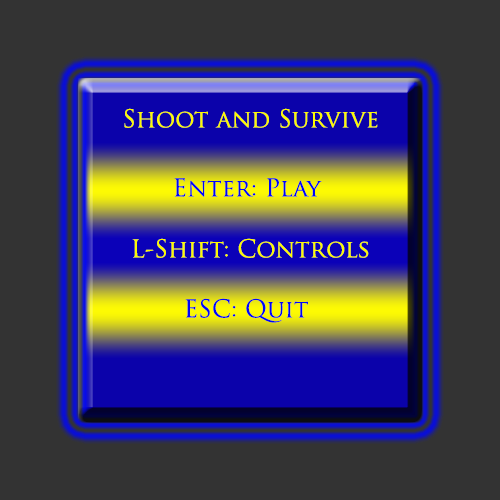
<style>
.page{position:relative;width:500px;height:500px;background:#333333}
.page>*{position:absolute;margin:0}
.t1{font:24px "TrajanPro-Regular";color:#fdfa03}
.t2{font:24px "TrajanPro-Regular";color:#0006f7}
</style>
<div class="page">
<p class="t1" style="left:124px;top:108px;width:254px;height:20px">Shoot and Survive</p>
<p class="t2" style="left:174px;top:178px;width:148px;height:19px">Enter: Play</p>
<p class="t1" style="left:132px;top:238px;width:237px;height:20px">L-Shift: Controls</p>
<p class="t2" style="left:185px;top:298px;width:123px;height:25px">ESC: Quit</p>
</div>
